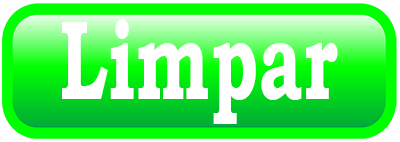
<style>
.page{position:relative;width:400px;height:142px;background:#ffffff}
.page>*{position:absolute;margin:0}
.t1{font:112.5px "BookmanOldStyle-Bold";letter-spacing:0.01em;color:#ffffff;scale:0.66 1}
</style>
<div class="page">
<p class="t1" style="left:62px;top:19px;width:276px;height:105px">Limpar</p>
</div>
